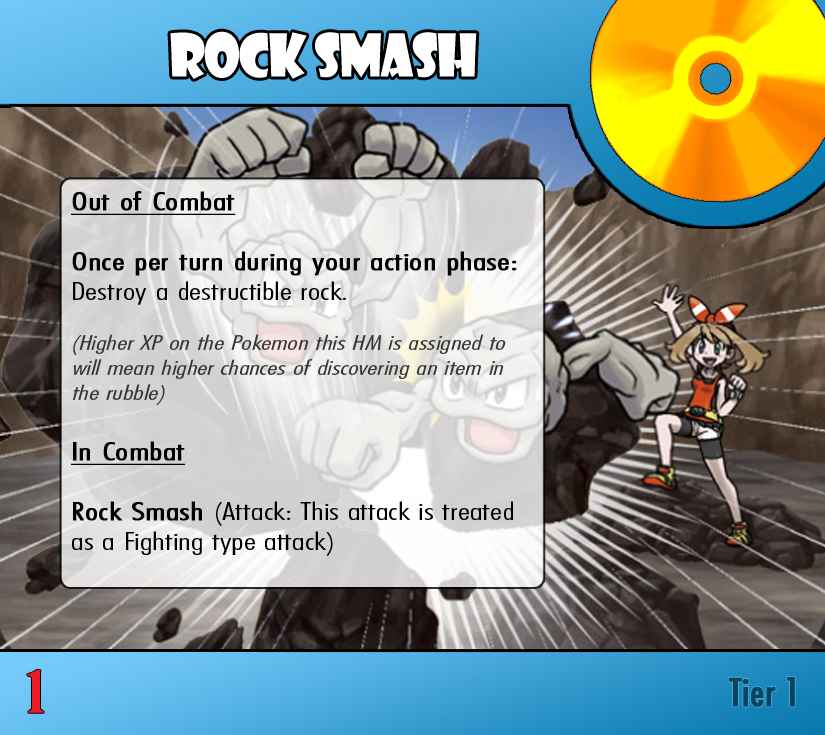
<style>
.page{position:relative;width:825px;height:735px}
.page>*{position:absolute;margin:0}
.t1{font:57.4px "ShowcardGothic-Reg";letter-spacing:-0.025em;color:#ffffff;scale:0.91 1}
.t2{font:20.8px "FuturaCondensedBQ-Light";color:#353535;font-style:italic;scale:1.5 1}
.t3{font:25px "FuturaCondensedBQ-Light";color:#000000;font-weight:bold;text-decoration:underline;scale:1.5 1}
.t4{font:25px "FuturaCondensedBQ-Light";color:#000000;font-weight:bold;scale:1.5 1}
.t5{font:25px "FuturaCondensedBQ-Light";color:#000000;scale:1.5 1}
.t6{font:55.6px "BirchStd";color:#ed1c24;font-weight:bold;scale:1.5 1}
.t7{font:37.5px "Futura-Condensed-Normal";color:#0c425d;font-weight:bold}
</style>
<div class="page">
<p class="t1" style="left:170px;top:31px;width:307px;height:48px">Rock Smash</p>
<p class="t2" style="left:71px;top:191px;width:446px;height:365px"><span class="t3">Out of Combat</span><span class="t4"><br><br>Once per turn during your action phase: </span><span class="t5">Destroy a destructible rock.<br><br></span>(Higher XP on the Pokemon this HM is assigned to will mean higher chances of discovering an item in the rubble)<br><br><span class="t3">In Combat<br><br></span><span class="t4">Rock Smash </span><span class="t5">(Attack: This attack is treated as a Fighting type attack)</span></p>
<p class="t6" style="left:27px;top:670px;width:17px;height:43px">1</p>
<p class="t7" style="left:728px;top:677px;width:67px;height:30px">Tier 1</p>
</div>
